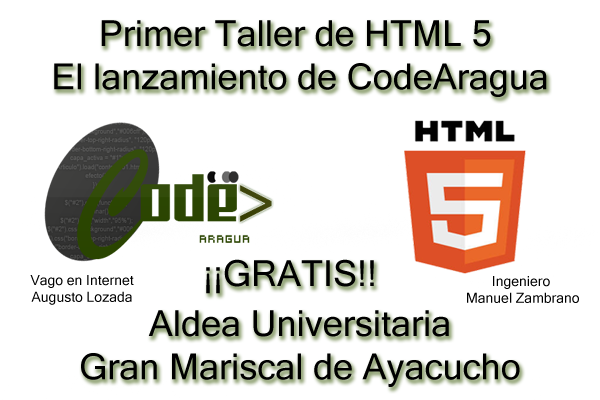
<style>
.page{position:relative;width:600px;height:400px;background:#ffffff}
.page>*{position:absolute;margin:0}
.t1{font:36px "MicrosoftSansSerif";color:#000000}
.t2{font:14px "MicrosoftSansSerif";color:#000000}
</style>
<div class="page">
<p class="t1" style="left:54px;top:20px;width:493px;height:77px;text-align:center">Primer Taller de HTML 5 <br>El lanzamiento de CodeAragua</p>
<p class="t1" style="left:206px;top:259px;width:168px;height:35px">¡¡GRATIS!!</p>
<p class="t2" style="left:30px;top:275px;width:104px;height:30px;text-align:center">Vago en Internet<br>Augusto Lozada</p>
<p class="t2" style="left:467px;top:276px;width:112px;height:27px;text-align:center">Ingeniero<br> Manuel Zambrano</p>
<p class="t1" style="left:81px;top:310px;width:439px;height:77px;text-align:center">Aldea Universitaria<br>Gran Mariscal de Ayacucho</p>
</div>
